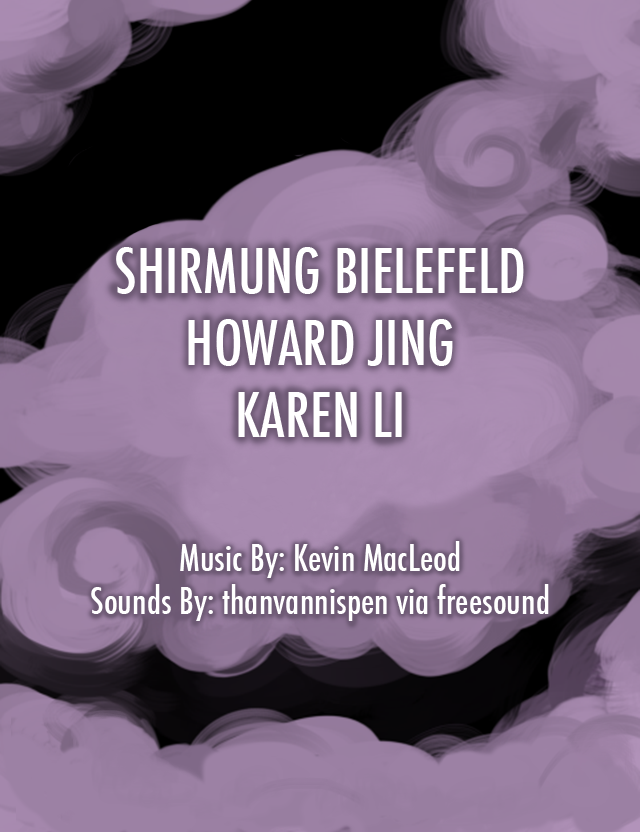
<style>
.page{position:relative;width:640px;height:832px}
.page>*{position:absolute;margin:0}
.t1{font:60px "Futura-CondensedMedium";color:#ffffff}
.t2{font:36px "Futura-CondensedMedium";color:#ffffff}
</style>
<div class="page">
<p class="t1" style="left:116px;top:247px;width:408px;height:190px;text-align:center">SHIRMUNG BIELEFELD<br>HOWARD JING<br>KAREN LI</p>
<p class="t2" style="left:91px;top:541px;width:458px;height:80px;text-align:center">Music By: Kevin MacLeod<br>Sounds By: thanvannispen via freesound</p>
</div>
